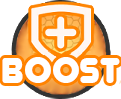
<style>
.page{position:relative;width:121px;height:99px;background:#ffffff}
.page>*{position:absolute;margin:0}
.t1{font:36px "Junegull";color:#ffffff}
</style>
<div class="page">
<p class="t1" style="left:2px;top:57px;width:118px;height:26px">BOOST</p>
</div>
